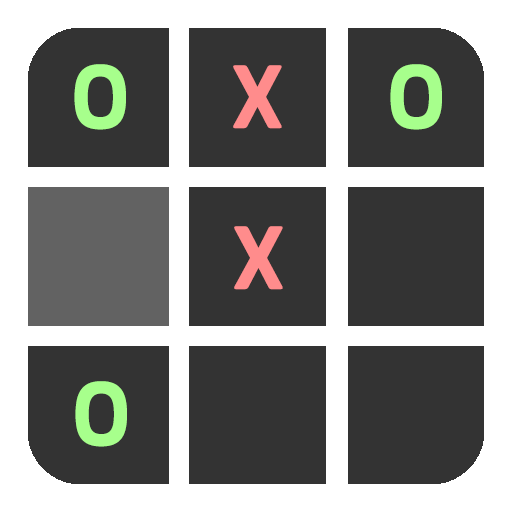
<style>
.page{position:relative;width:512px;height:512px;background:#333333}
.page>*{position:absolute;margin:0}
.t1{font:70px "RecipekoreaM";color:#a7ff8c}
.t2{font:70px "RecipekoreaM";color:#ff8c8c}
</style>
<div class="page">
<p class="t1" style="left:74px;top:64px;width:52px;height:66px">O</p>
<p class="t2" style="left:233px;top:65px;width:49px;height:64px">X</p>
<p class="t1" style="left:390px;top:64px;width:52px;height:66px">O</p>
<p class="t2" style="left:234px;top:226px;width:49px;height:64px">X</p>
<p class="t1" style="left:75px;top:381px;width:52px;height:66px">O</p>
</div>
